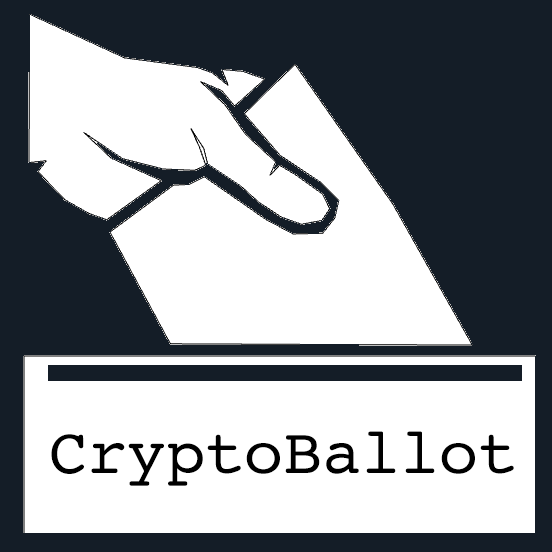
<style>
.page{position:relative;width:552px;height:552px;background:#ffffff}
.page>*{position:absolute;margin:0}
.t1{font:65px "Courier";color:#000000}
</style>
<div class="page">
<p class="t1" style="left:51px;top:431px;width:463px;height:55px">CryptoBallot</p>
</div>
